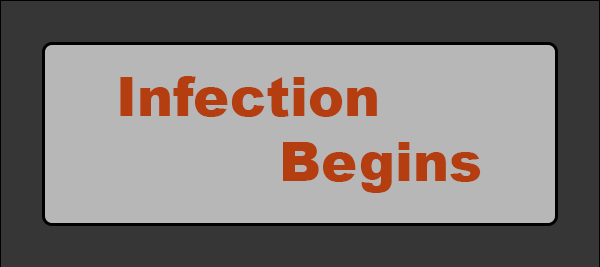
<style>
.page{position:relative;width:600px;height:267px;background:#b7b7b7}
.page>*{position:absolute;margin:0}
.t1{font:12px "Arial-Black";color:#b43e10}
</style>
<div class="page">
<p class="t1" style="left:120px;top:76px;width:361px;height:117px;text-align:right">Infection<br>Begins</p>
</div>
